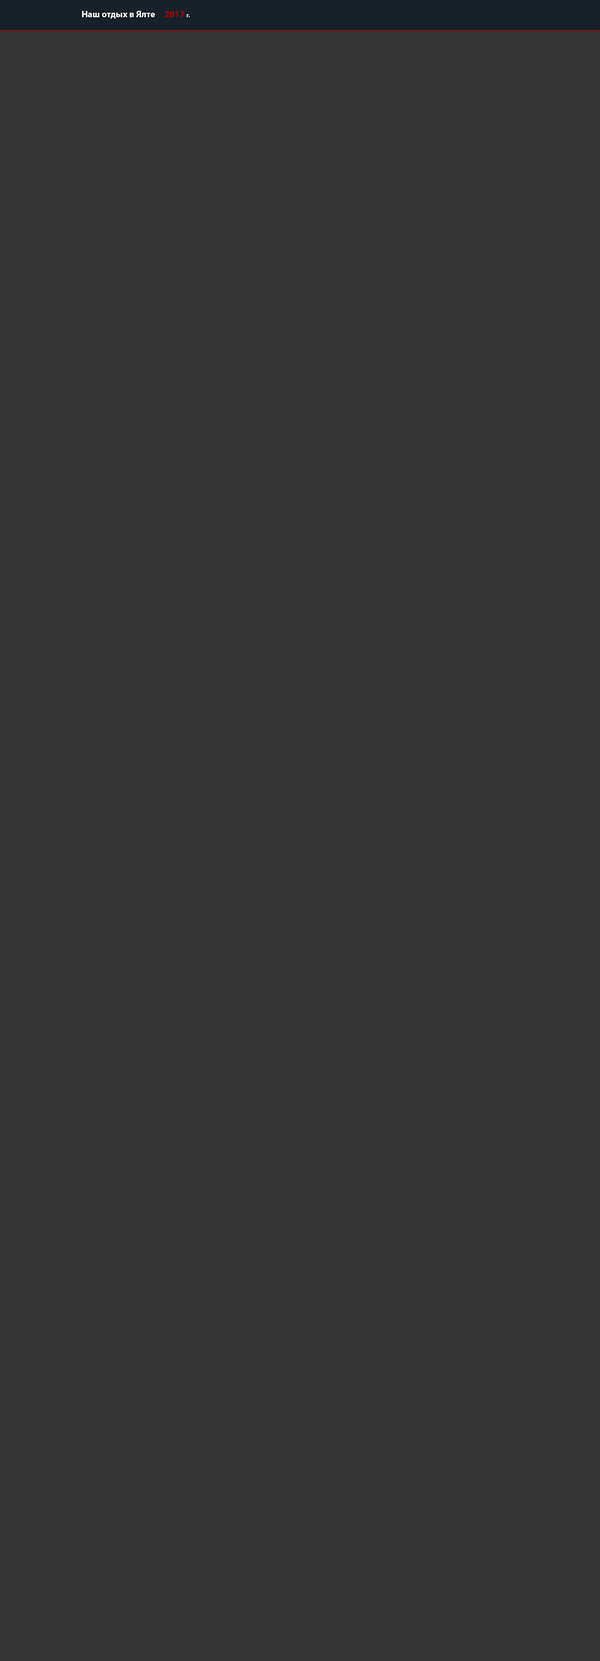
<style>
.page{position:relative;width:600px;height:1661px;background:#333333}
.page>*{position:absolute;margin:0}
.t1{font:9px "MyriadPro-Bold";color:#ffffff}
.t2{font:9px "MyriadPro-Bold";color:#ac0003}
.t3{font:6px "MyriadPro-Bold";color:#ffffff}
</style>
<div class="page">
<p class="t1" style="left:82px;top:11px;width:73px;height:8px">Наш отдых в Ялте</p>
<p class="t2" style="left:165px;top:11px;width:25px;height:6px">2017 <span class="t3">г.</span></p>
</div>
